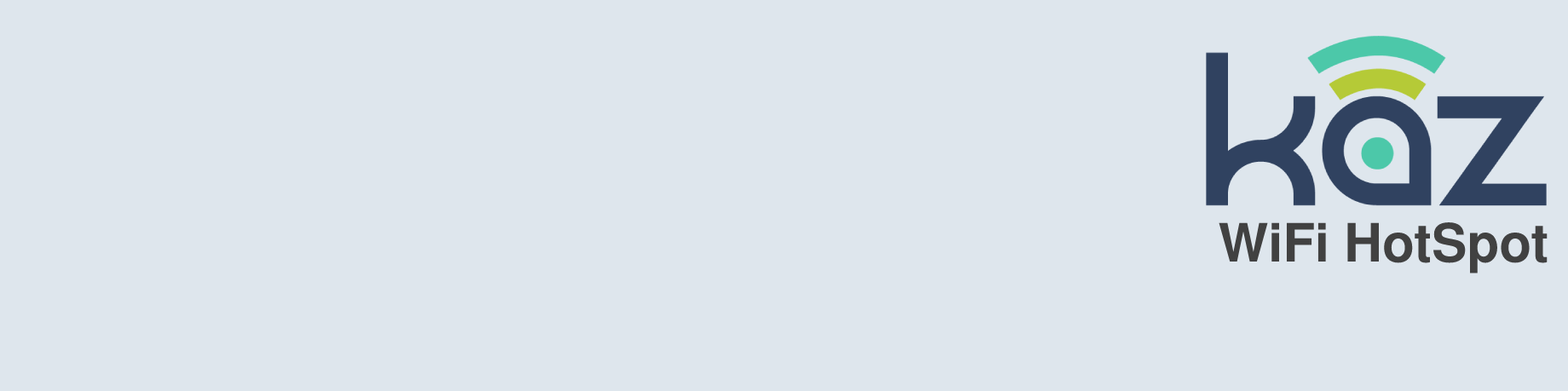
<style>
.page{position:relative;width:1568px;height:391px;background:#dee6ed}
.page>*{position:absolute;margin:0}
.t1{font:52.8px "NimbusSanL-Bol";color:#414141}
</style>
<div class="page">
<p class="t1" style="left:1219px;top:222px;width:329px;height:52px">WiFi HotSpot</p>
</div>
